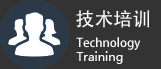
<style>
.page{position:relative;width:161px;height:69px;background:#333333}
.page>*{position:absolute;margin:0}
.t1{font:18.9px "AdobeHeitiStd-Regular";color:#fefefe}
.t2{font:12px "AdobeHeitiStd-Regular";color:#fefefe}
</style>
<div class="page">
<p class="t1" style="left:76px;top:10px;width:74px;height:18px">技术培训</p>
<p class="t2" style="left:76px;top:37px;width:65px;height:13px">Technology</p>
</div>
